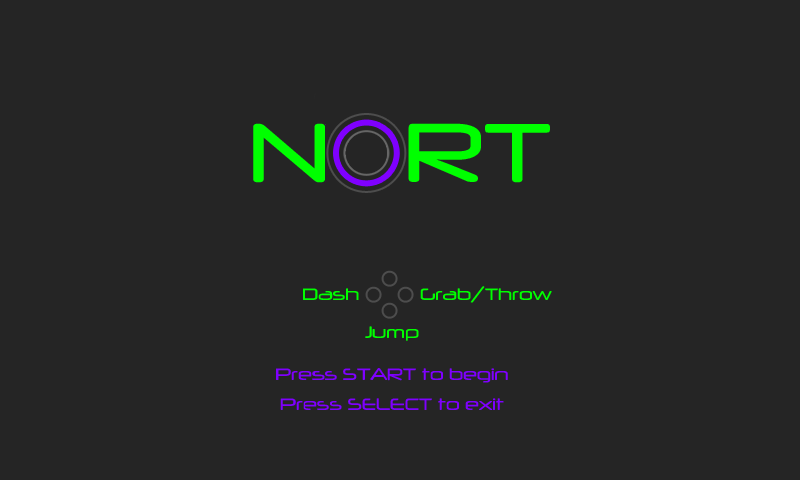
<style>
.page{position:relative;width:800px;height:480px;background:#252525}
.page>*{position:absolute;margin:0}
.t1{font:80px "Neuropol-Regular";color:#00ff00}
.t2{font:16px "Neuropol-Regular";color:#00ff00}
.t3{font:16px/30px "Neuropol-Regular";color:#7f00ff}
</style>
<div class="page">
<p class="t1" style="left:253px;top:123px;width:297px;height:60px">NORT</p>
<p class="t2" style="left:303px;top:288px;width:56px;height:12px">Dash</p>
<p class="t2" style="left:420px;top:286px;width:132px;height:17px">Grab/Throw</p>
<p class="t2" style="left:365px;top:326px;width:54px;height:15px">Jump</p>
<p class="t3" style="left:276px;top:368px;width:232px;height:42px;text-align:center">Press START to begin<br>Press SELECT to exit</p>
</div>
